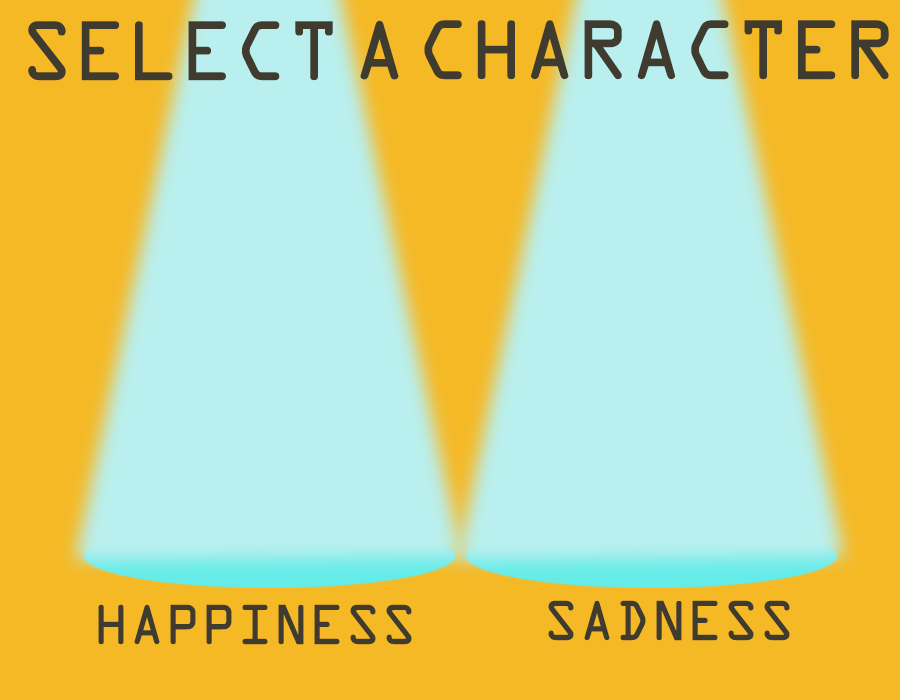
<style>
.page{position:relative;width:900px;height:700px;background:#f5b926}
.page>*{position:absolute;margin:0}
.t1{font:75.3px "OCRAStd";letter-spacing:-0.01em;color:#403b2f}
.t2{font:75px "OCRAStd";color:#403b2f}
.t3{font:50.2px "OCRAStd";color:#403b2f}
</style>
<div class="page">
<p class="t1" style="left:28px;top:21px;width:305px;height:60px">SELECT</p>
<p class="t2" style="left:360px;top:20px;width:39px;height:60px">A</p>
<p class="t1" style="left:424px;top:20px;width:465px;height:60px">CHARACTER</p>
<p class="t3" style="left:98px;top:604px;width:314px;height:41px">HAPPINESS</p>
<p class="t3" style="left:548px;top:600px;width:242px;height:41px">SADNESS</p>
</div>
